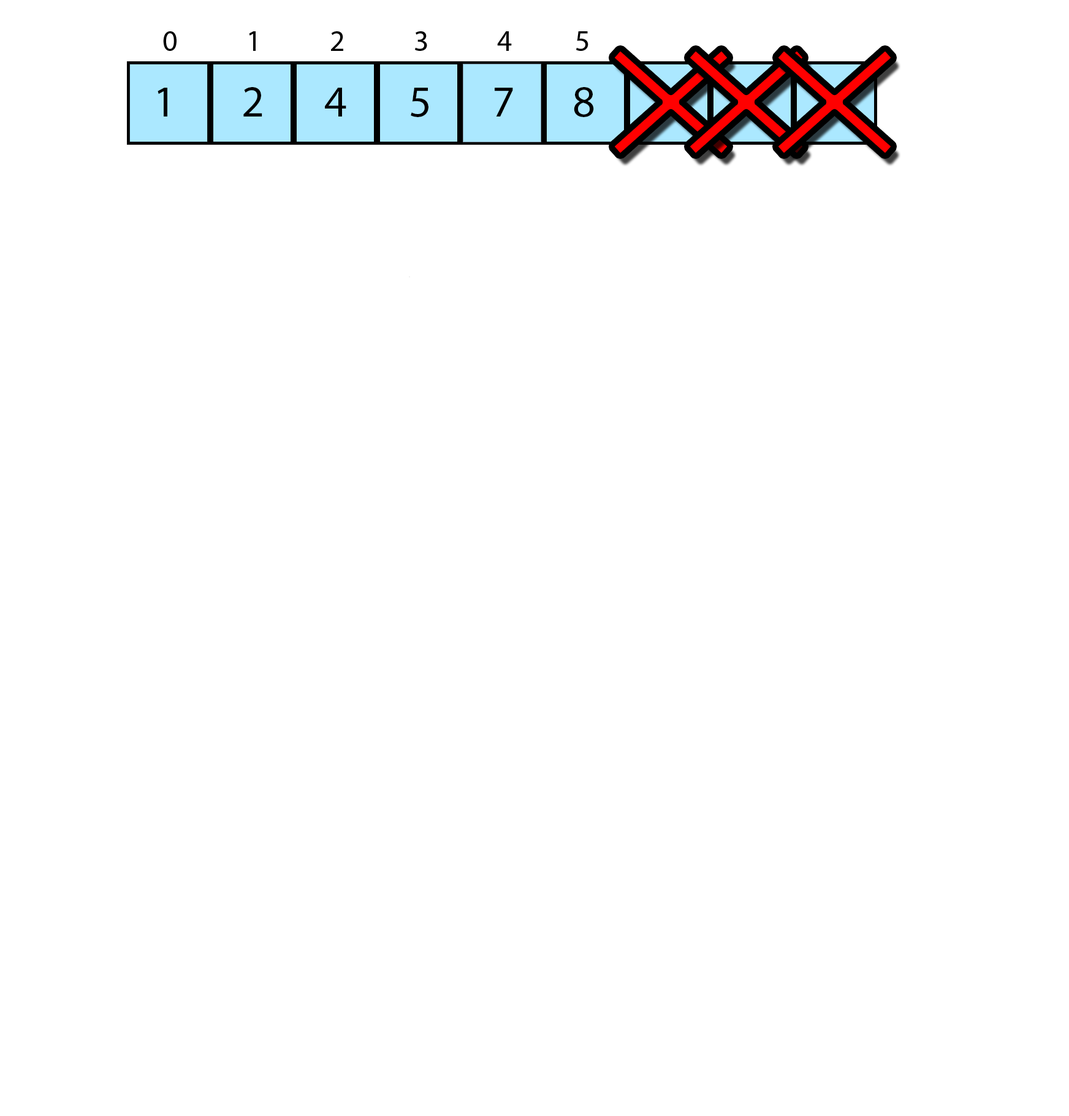
<style>
.page{position:relative;width:1069px;height:1116px;background:#ffffff}
.page>*{position:absolute;margin:0}
.t1{font:44.1px "MyriadPro-Regular";color:#000000}
</style>
<div class="page">
<p class="t1" style="left:158px;top:88px;width:9px;height:28px">1</p>
<p class="t1" style="left:243px;top:87px;width:19px;height:29px">2</p>
<p class="t1" style="left:325px;top:88px;width:21px;height:28px">4</p>
<p class="t1" style="left:411px;top:88px;width:17px;height:29px">5</p>
<p class="t1" style="left:495px;top:88px;width:18px;height:28px">7</p>
<p class="t1" style="left:574px;top:87px;width:20px;height:30px">8</p>
</div>
